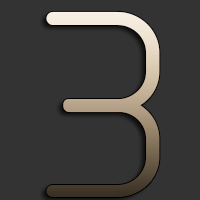
<style>
.page{position:relative;width:200px;height:200px;background:#333333}
.page>*{position:absolute;margin:0}
.t1{font:243.7px "GreyscaleBasic-Regular";scale:1.04 1}
</style>
<div class="page">
<p class="t1" style="left:46px;top:11px;width:114px;height:186px">3</p>
</div>
